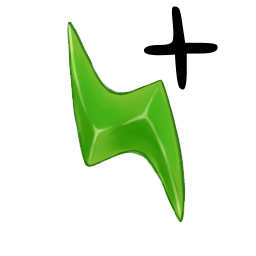
<style>
.page{position:relative;width:256px;height:256px;background:#ffffff}
.page>*{position:absolute;margin:0}
.t1{font:266.6px "xiascript_2015430";color:#000000}
</style>
<div class="page">
<p class="t1" style="left:144px;top:6px;width:74px;height:84px">+</p>
</div>
